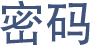
<style>
.page{position:relative;width:93px;height:47px;background:#ffffff}
.page>*{position:absolute;margin:0}
.t1{font:48px "AdobeHeitiStd-Regular";color:#40537b}
</style>
<div class="page">
<p class="t1" style="left:0px;top:0px;width:90px;height:45px">密码</p>
</div>
